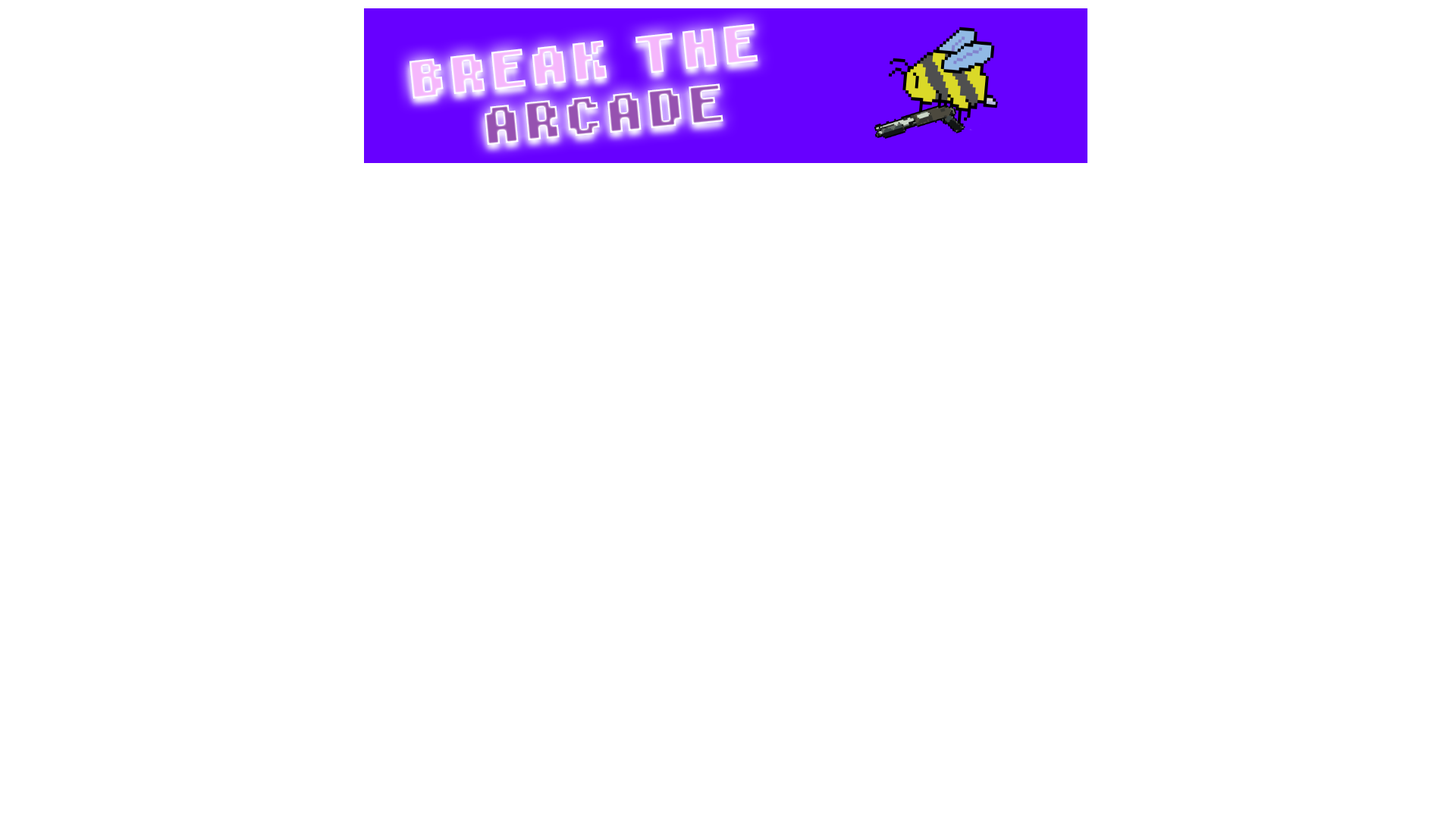
<style>
.page{position:relative;width:1456px;height:819px;background:#ffffff}
.page>*{position:absolute;margin:0}
.t1{font:50.1px "MousePro-Bold";letter-spacing:0.085em;color:#f5b7fc}
.t2{font:50.3px "MousePro-Bold";letter-spacing:0.085em}
</style>
<div class="page">
<p class="t1" style="left:409px;top:24px;width:349px;height:75px;rotate:-6deg">BREAK THE</p>
<p class="t2" style="left:485px;top:83px;width:238px;height:62px;rotate:-6deg">ARCADE</p>
</div>
